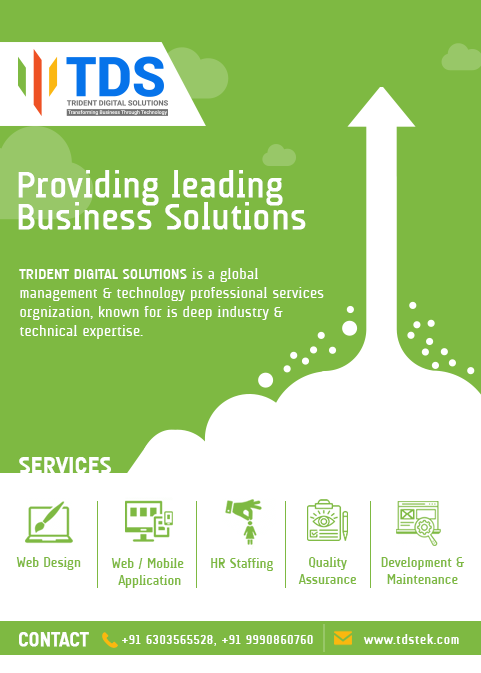
<style>
.page{position:relative;width:481px;height:673px;background:#7eb942}
.page>*{position:absolute;margin:0}
.t1{font:36px/32px "AUdimat-Regular";color:#ffffff;font-weight:bold}
.t2{font:15px/19px "AUdimat-Regular";letter-spacing:0.02em;color:#ffffff}
.t3{font:15px/19px "AUdimat-Bold";letter-spacing:0.02em;color:#ffffff;text-transform:uppercase}
.t4{font:24px "AUdimat-Bold";color:#ffffff;text-transform:uppercase;font-weight:bold}
.t5{font:14px "AUdimat-Bold";color:#7eb942}
.t6{font:14px/16.5px "AUdimat-Bold";color:#7eb942}
.t7{font:20px "AUdimat-Bold";color:#ffffff;text-transform:uppercase;font-weight:bold}
.t8{font:12.5px "AUdimat-Bold";letter-spacing:0.08em;color:#ffffff}
</style>
<div class="page">
<p class="t1" style="left:18px;top:170px;width:288px;height:60px">Providing leading<br>Business Solutions</p>
<p class="t2" style="left:19px;top:268px;width:305px;height:71px"><span class="t3">Trident Digital Solutions </span>is a global <br>management &amp; technology professional services <br>orgnization, known for is deep industry &amp; <br>technical expertise.</p>
<p class="t4" style="left:19px;top:457px;width:92px;height:17px">Services</p>
<p class="t5" style="left:16px;top:557px;width:65px;height:13px">Web Design</p>
<p class="t6" style="left:111px;top:558px;width:73px;height:30px;text-align:center">Web / Mobile <br>Application</p>
<p class="t5" style="left:211px;top:558px;width:62px;height:13px">HR Staffing</p>
<p class="t6" style="left:298px;top:557px;width:59px;height:27px;text-align:center">Quality<br>Assurance</p>
<p class="t6" style="left:381px;top:557px;width:84px;height:27px;text-align:center">Development &amp;<br>Maintenance</p>
<p class="t7" style="left:19px;top:632px;width:70px;height:15px">contact</p>
<p class="t8" style="left:122px;top:635px;width:191px;height:11px">+91 6303565528, +91 9990860760</p>
<p class="t8" style="left:363px;top:634px;width:96px;height:10px">www.tdstek.com</p>
</div>
